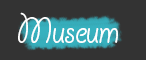
<style>
.page{position:relative;width:146px;height:60px;background:#333333}
.page>*{position:absolute;margin:0}
.t1{font:40px "GiddyupStd";letter-spacing:-0.023em;color:#ffffff}
</style>
<div class="page">
<p class="t1" style="left:18px;top:12px;width:100px;height:31px">Museum</p>
</div>
